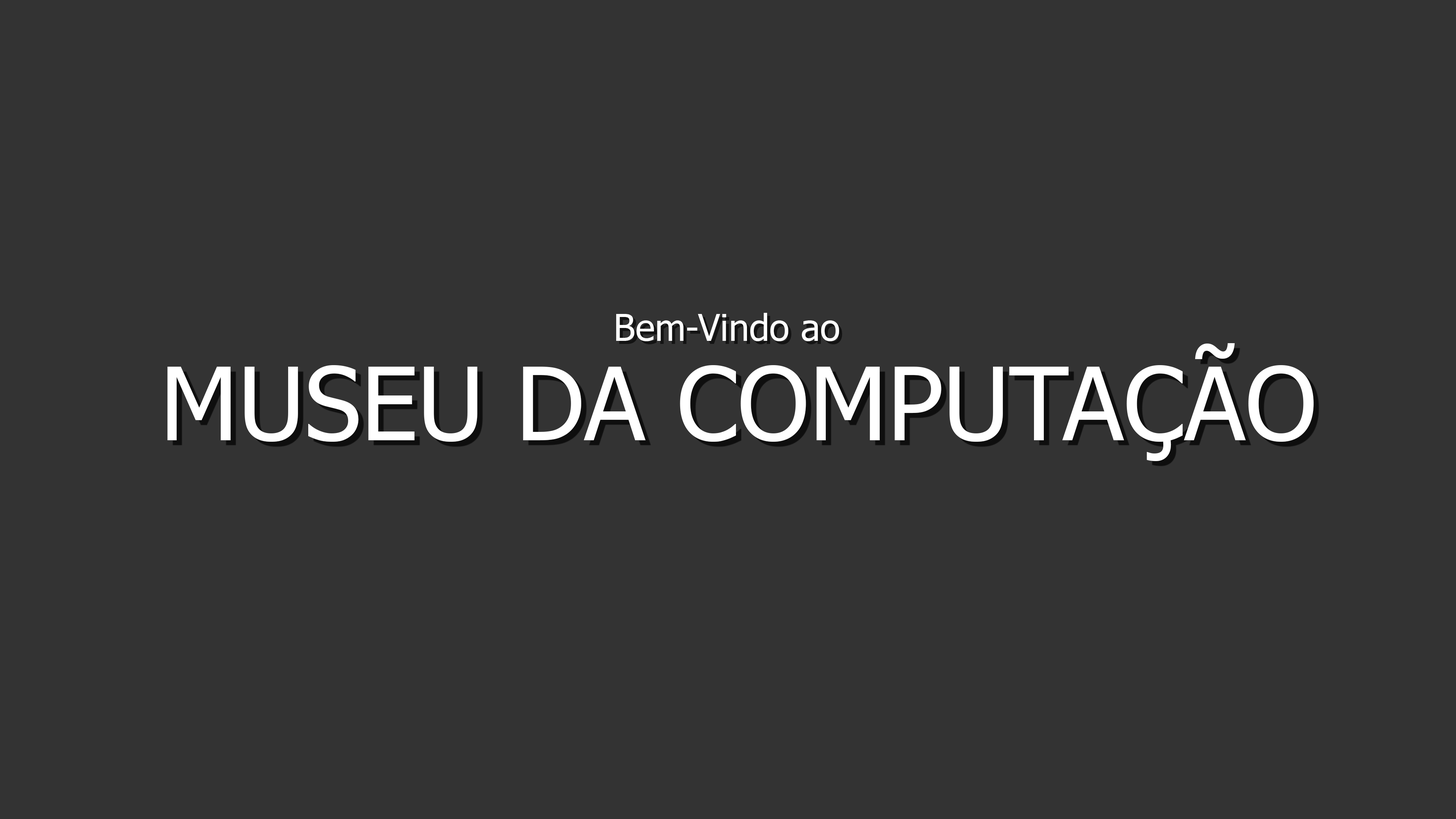
<style>
.page{position:relative;width:1456px;height:819px;background:#333333}
.page>*{position:absolute;margin:0}
.t1{font:36.8px "Tahoma";color:#ffffff}
.t2{font:101.1px "Tahoma";color:#ffffff}
</style>
<div class="page">
<p class="t1" style="left:616px;top:313px;width:223px;height:28px">Bem-Vindo ao</p>
<p class="t2" style="left:167px;top:343px;width:1147px;height:118px">MUSEU DA COMPUTAÇÃO</p>
</div>
